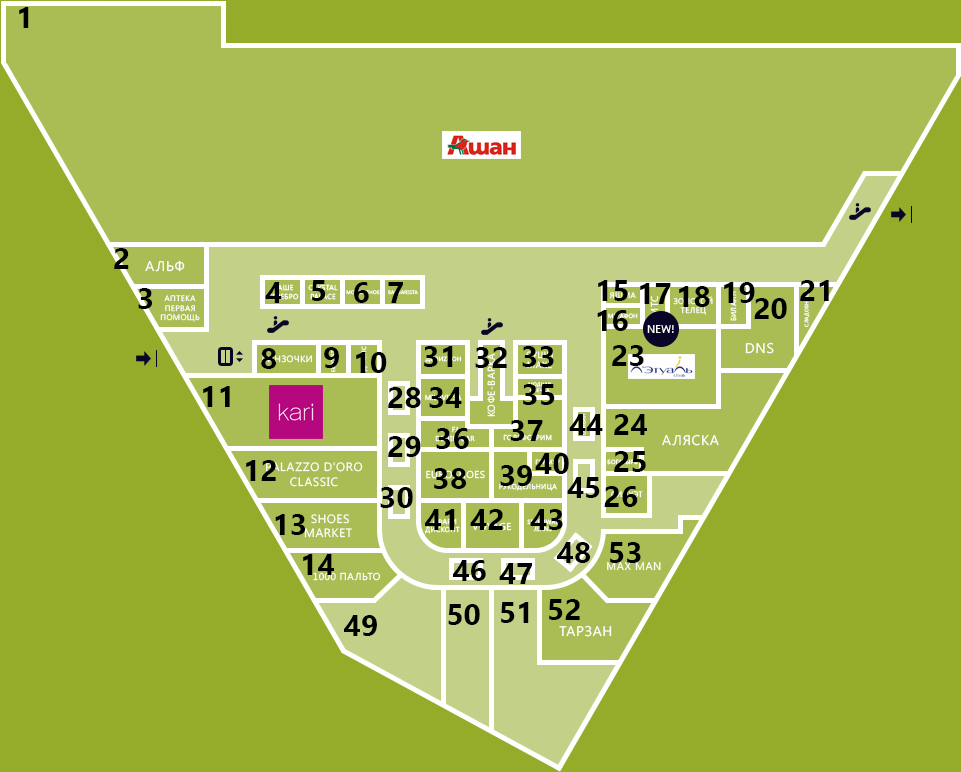
<style>
.page{position:relative;width:961px;height:772px;background:#94ac29}
.page>*{position:absolute;margin:0}
.t1{font:30px "SegoeUI-Bold";color:#000000}
.t2{font:14px "SegoeUI";letter-spacing:0.05em;color:#ffffff;text-transform:uppercase}
.t3{font:7px "SegoeUI";letter-spacing:0.05em;text-transform:uppercase}
.t4{font:7px "SegoeUI";letter-spacing:0.05em;color:#ffffff;text-transform:uppercase}
.t5{font:5px "SegoeUI";letter-spacing:0.05em;color:#ffffff;text-transform:uppercase}
.t6{font:8px "SegoeUI";letter-spacing:0.05em;color:#ffffff;text-transform:uppercase}
.t7{font:10px "SegoeUI";letter-spacing:0.05em;color:#ffffff;text-transform:uppercase}
.t8{font:6px "SegoeUI";letter-spacing:0.05em;color:#ffffff;text-transform:uppercase}
.t9{font:11px "SegoeUI";color:#ffffff;text-transform:uppercase}
.t10{font:5px "SegoeUI";letter-spacing:0.05em;text-transform:uppercase}
.t11{font:9px "SegoeUI";letter-spacing:0.05em;color:#ffffff;text-transform:uppercase}
.t12{font:12px "SegoeUI";letter-spacing:0.05em;color:#ffffff;text-transform:uppercase}
.t13{font:8px "SegoeUI";letter-spacing:0.05em;text-transform:uppercase}
.t14{font:6px "SegoeUI";letter-spacing:0.05em;text-transform:uppercase}
.t15{font:11px "SegoeUI";letter-spacing:0.05em;color:#ffffff;text-transform:uppercase}
</style>
<div class="page">
<p class="t1" style="left:19px;top:7px;width:10px;height:21px">1</p>
<p class="t1" style="left:114px;top:248px;width:15px;height:21px">2</p>
<p class="t2" style="left:145px;top:260px;width:40px;height:12px">Альф</p>
<p class="t1" style="left:312px;top:280px;width:14px;height:21px">5</p>
<p class="t1" style="left:598px;top:280px;width:30px;height:21px">15</p>
<p class="t1" style="left:800px;top:280px;width:29px;height:21px">21</p>
<p class="t1" style="left:138px;top:288px;width:15px;height:21px">3</p>
<p class="t1" style="left:265px;top:282px;width:17px;height:21px">4</p>
<p class="t3" style="left:267px;top:284px;width:32px;height:16px;text-align:center">Наше<br>серебро</p>
<p class="t4" style="left:308px;top:284px;width:30px;height:16px;text-align:center">Crystal<br>palace</p>
<p class="t5" style="left:346px;top:290px;width:34px;height:5px">Мороженое</p>
<p class="t1" style="left:354px;top:282px;width:15px;height:21px">6</p>
<p class="t5" style="left:388px;top:290px;width:30px;height:5px">Barbarista</p>
<p class="t1" style="left:388px;top:282px;width:15px;height:21px">7</p>
<p class="t6" style="left:610px;top:292px;width:26px;height:7px">Яшма</p>
<p class="t1" style="left:640px;top:283px;width:31px;height:21px">17</p>
<p class="t1" style="left:679px;top:286px;width:31px;height:21px">18</p>
<p class="t1" style="left:724px;top:282px;width:31px;height:21px">19</p>
<p class="t4" style="left:729px;top:291px;width:8px;height:30px;rotate:-90deg">Билайн</p>
<p class="t5" style="left:804px;top:289px;width:6px;height:38px;rotate:-90deg">Сладовница</p>
<p class="t6" style="left:160px;top:295px;width:40px;height:27px;text-align:center">Аптека<br>первая<br>помощь</p>
<p class="t7" style="left:650px;top:296px;width:9px;height:21px;rotate:-90deg">мтс</p>
<p class="t6" style="left:673px;top:296px;width:40px;height:19px;text-align:center">Золотой<br>телец</p>
<p class="t1" style="left:754px;top:298px;width:33px;height:21px">20</p>
<p class="t1" style="left:597px;top:310px;width:31px;height:21px">16</p>
<p class="t8" style="left:608px;top:313px;width:30px;height:6px">Мегафон</p>
<p class="t9" style="left:647px;top:325px;width:27px;height:8px">New!</p>
<p class="t2" style="left:745px;top:342px;width:29px;height:12px">DNS</p>
<p class="t1" style="left:261px;top:348px;width:16px;height:21px">8</p>
<p class="t1" style="left:324px;top:347px;width:15px;height:21px">9</p>
<p class="t10" style="left:331px;top:347px;width:5px;height:25px;rotate:-90deg">Евросеть</p>
<p class="t1" style="left:356px;top:352px;width:31px;height:21px">10</p>
<p class="t1" style="left:424px;top:346px;width:29px;height:21px">31</p>
<p class="t1" style="left:475px;top:347px;width:32px;height:21px">32</p>
<p class="t7" style="left:487px;top:353px;width:8px;height:64px;rotate:-90deg">Кофе-варка</p>
<p class="t1" style="left:522px;top:346px;width:32px;height:21px">33</p>
<p class="t11" style="left:526px;top:351px;width:27px;height:18px;text-align:center">суши<br>Make</p>
<p class="t1" style="left:612px;top:345px;width:32px;height:21px">23</p>
<p class="t11" style="left:260px;top:355px;width:52px;height:8px">ЛинзОчки</p>
<p class="t8" style="left:425px;top:356px;width:36px;height:7px">Дивиzион</p>
<p class="t1" style="left:203px;top:386px;width:27px;height:21px">11</p>
<p class="t1" style="left:388px;top:387px;width:33px;height:21px">28</p>
<p class="t1" style="left:429px;top:387px;width:33px;height:21px">34</p>
<p class="t1" style="left:523px;top:384px;width:32px;height:21px">35</p>
<p class="t10" style="left:528px;top:382px;width:23px;height:11px;text-align:center">модная<br>овечка</p>
<p class="t3" style="left:425px;top:394px;width:37px;height:7px">Milavitsa</p>
<p class="t1" style="left:569px;top:414px;width:34px;height:21px">44</p>
<p class="t5" style="left:581px;top:413px;width:5px;height:22px;rotate:-90deg">Оливин</p>
<p class="t1" style="left:614px;top:414px;width:33px;height:21px">24</p>
<p class="t1" style="left:510px;top:420px;width:33px;height:21px">37</p>
<p class="t1" style="left:388px;top:436px;width:33px;height:21px">29</p>
<p class="t1" style="left:436px;top:428px;width:33px;height:21px">36</p>
<p class="t4" style="left:503px;top:434px;width:49px;height:7px">Гольфстрим</p>
<p class="t2" style="left:662px;top:434px;width:57px;height:12px">Аляска</p>
<p class="t1" style="left:246px;top:460px;width:30px;height:21px">12</p>
<p class="t12" style="left:266px;top:462px;width:97px;height:25px;text-align:center">Palazzo D'oro<br>CLASSIC</p>
<p class="t1" style="left:535px;top:453px;width:34px;height:21px">40</p>
<p class="t8" style="left:607px;top:459px;width:31px;height:6px">Богатырь</p>
<p class="t1" style="left:614px;top:451px;width:32px;height:21px">25</p>
<p class="t7" style="left:426px;top:470px;width:59px;height:9px">Euroshoes</p>
<p class="t1" style="left:434px;top:468px;width:33px;height:21px">38</p>
<p class="t1" style="left:500px;top:465px;width:32px;height:21px">39</p>
<p class="t4" style="left:499px;top:483px;width:58px;height:8px">Рукодельница</p>
<p class="t1" style="left:567px;top:477px;width:33px;height:21px">45</p>
<p class="t1" style="left:604px;top:486px;width:34px;height:21px">26</p>
<p class="t1" style="left:380px;top:487px;width:33px;height:21px">30</p>
<p class="t13" style="left:611px;top:491px;width:32px;height:7px">Силуэт</p>
<p class="t1" style="left:425px;top:509px;width:30px;height:21px">41</p>
<p class="t1" style="left:470px;top:509px;width:33px;height:21px">42</p>
<p class="t1" style="left:530px;top:509px;width:33px;height:21px">43</p>
<p class="t1" style="left:275px;top:514px;width:31px;height:21px">13</p>
<p class="t12" style="left:304px;top:514px;width:48px;height:24px;text-align:center">Shoes<br>market</p>
<p class="t3" style="left:425px;top:518px;width:35px;height:16px;text-align:center">Сафари<br>дисконт</p>
<p class="t14" style="left:527px;top:519px;width:32px;height:13px;text-align:center">SPEEDWAY<br>JEANS</p>
<p class="t1" style="left:557px;top:542px;width:34px;height:21px">48</p>
<p class="t1" style="left:610px;top:542px;width:31px;height:21px">53</p>
<p class="t1" style="left:303px;top:554px;width:31px;height:21px">14</p>
<p class="t1" style="left:453px;top:560px;width:33px;height:21px">46</p>
<p class="t1" style="left:499px;top:563px;width:33px;height:21px">47</p>
<p class="t15" style="left:607px;top:562px;width:54px;height:9px">Max man</p>
<p class="t7" style="left:313px;top:572px;width:67px;height:9px">1000 пальто</p>
<p class="t1" style="left:448px;top:604px;width:32px;height:21px">50</p>
<p class="t1" style="left:501px;top:602px;width:28px;height:21px">51</p>
<p class="t1" style="left:549px;top:599px;width:31px;height:21px">52</p>
<p class="t1" style="left:344px;top:615px;width:33px;height:21px">49</p>
<p class="t2" style="left:559px;top:625px;width:53px;height:12px">Тарзан</p>
</div>
